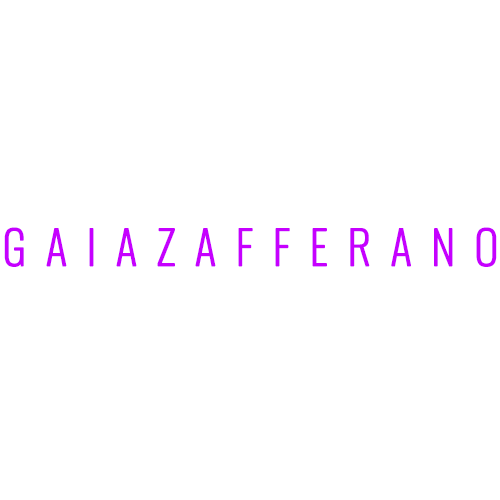
<style>
.page{position:relative;width:500px;height:500px;background:#ffffff}
.page>*{position:absolute;margin:0}
.t1{font:45.8px "Oswald-ExtraLight";letter-spacing:0.4em;color:#c600ff;text-transform:uppercase;font-weight:bold}
</style>
<div class="page">
<p class="t1" style="left:4px;top:227px;width:493px;height:40px">gaiaZafferano</p>
</div>
